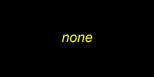
<style>
.page{position:relative;width:154px;height:77px;background:#000000}
.page>*{position:absolute;margin:0}
.t1{font:14px "Arial-ItalicMT";color:#f4fc1d}
</style>
<div class="page">
<p class="t1" style="left:62px;top:34px;width:31px;height:9px">none</p>
</div>
